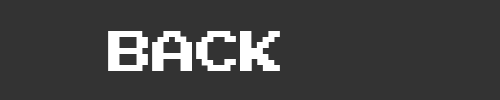
<style>
.page{position:relative;width:500px;height:100px;background:#333333}
.page>*{position:absolute;margin:0}
.t1{font:80px "ArcadeClassic";color:#ffffff}
</style>
<div class="page">
<p class="t1" style="left:108px;top:31px;width:172px;height:40px">back</p>
</div>
